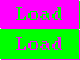
<style>
.page{position:relative;width:80px;height:60px;background:#ff00ff}
.page>*{position:absolute;margin:0}
.t1{font:24px "DOSGothic";color:#00ff00}
.t2{font:24px "DOSGothic";color:#ff00ff}
</style>
<div class="page">
<p class="t1" style="left:16px;top:7px;width:46px;height:13px">Load</p>
<p class="t2" style="left:16px;top:37px;width:46px;height:13px">Load</p>
</div>
